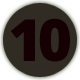
<style>
.page{position:relative;width:80px;height:80px;background:#302c24}
.page>*{position:absolute;margin:0}
.t1{font:58.2px "OpenSans-Extrabold";letter-spacing:-0.08em;color:#150003}
</style>
<div class="page">
<p class="t1" style="left:10px;top:18px;width:60px;height:44px">10</p>
</div>
